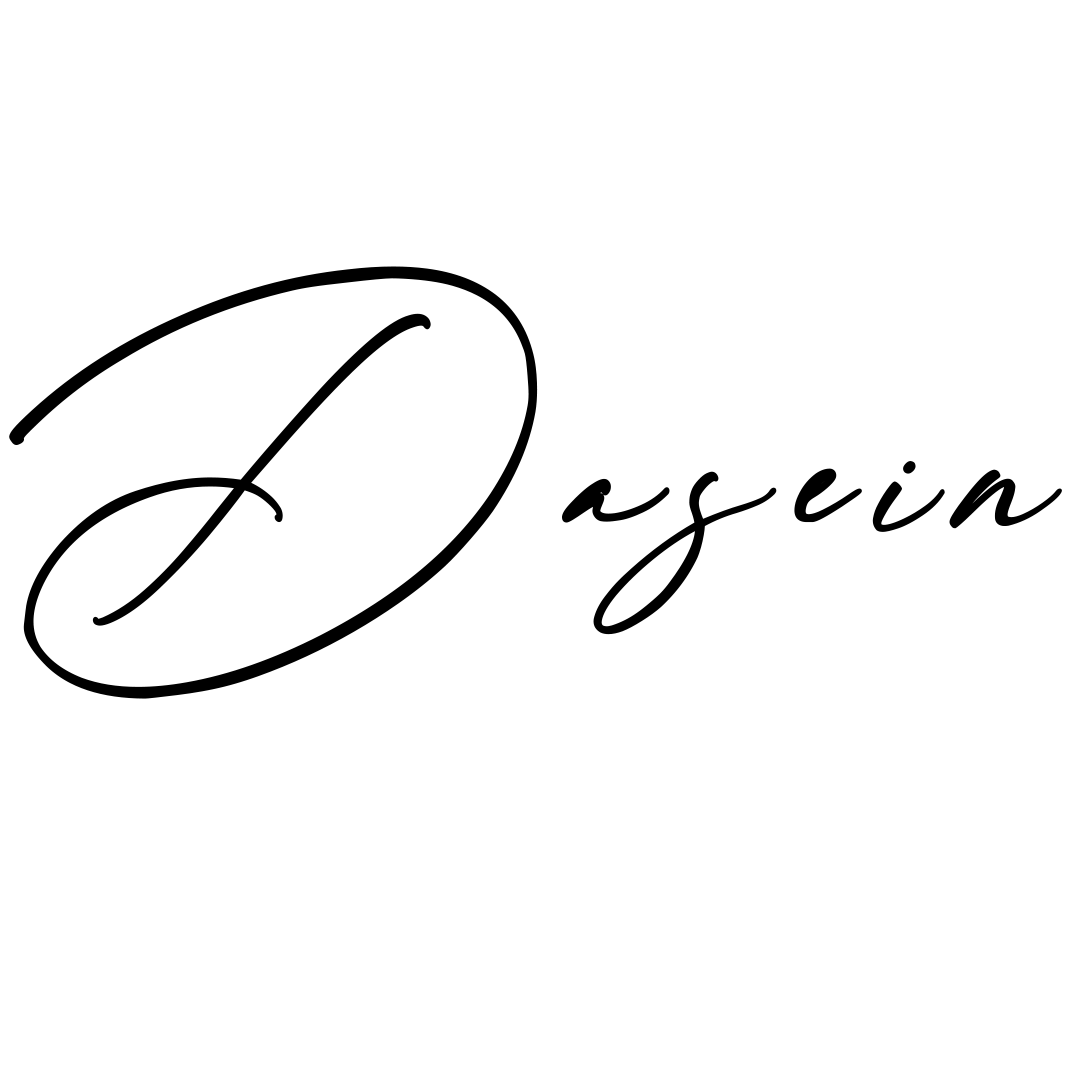
<style>
.page{position:relative;width:1080px;height:1080px;background:#ffffff}
.page>*{position:absolute;margin:0}
.t1{font:300px "Rellington";letter-spacing:0.08em;color:#000000;font-weight:bold;font-style:italic}
</style>
<div class="page">
<p class="t1" style="left:9px;top:266px;width:1053px;height:433px">Dasein</p>
</div>
